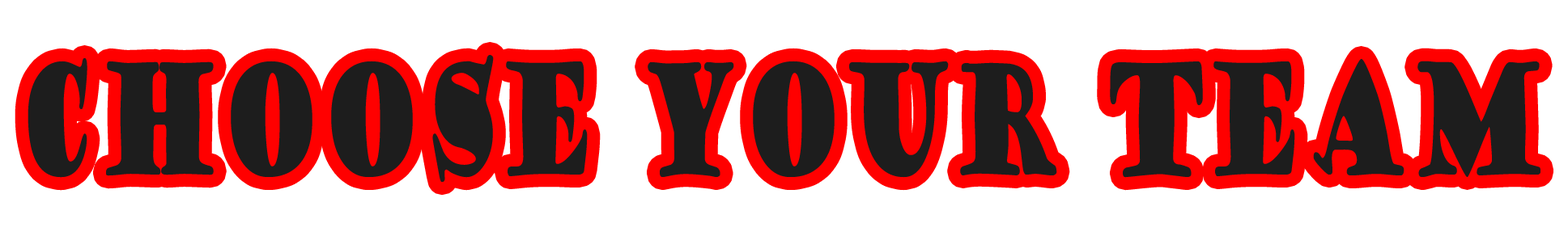
<style>
.page{position:relative;width:1568px;height:236px;background:#ffffff}
.page>*{position:absolute;margin:0}
.t1{font:150.6px "GoudyStout";color:#1d1d1d;scale:0.54 1}
</style>
<div class="page">
<p class="t1" style="left:28px;top:54px;width:1512px;height:129px">Choose Your Team</p>
</div>
